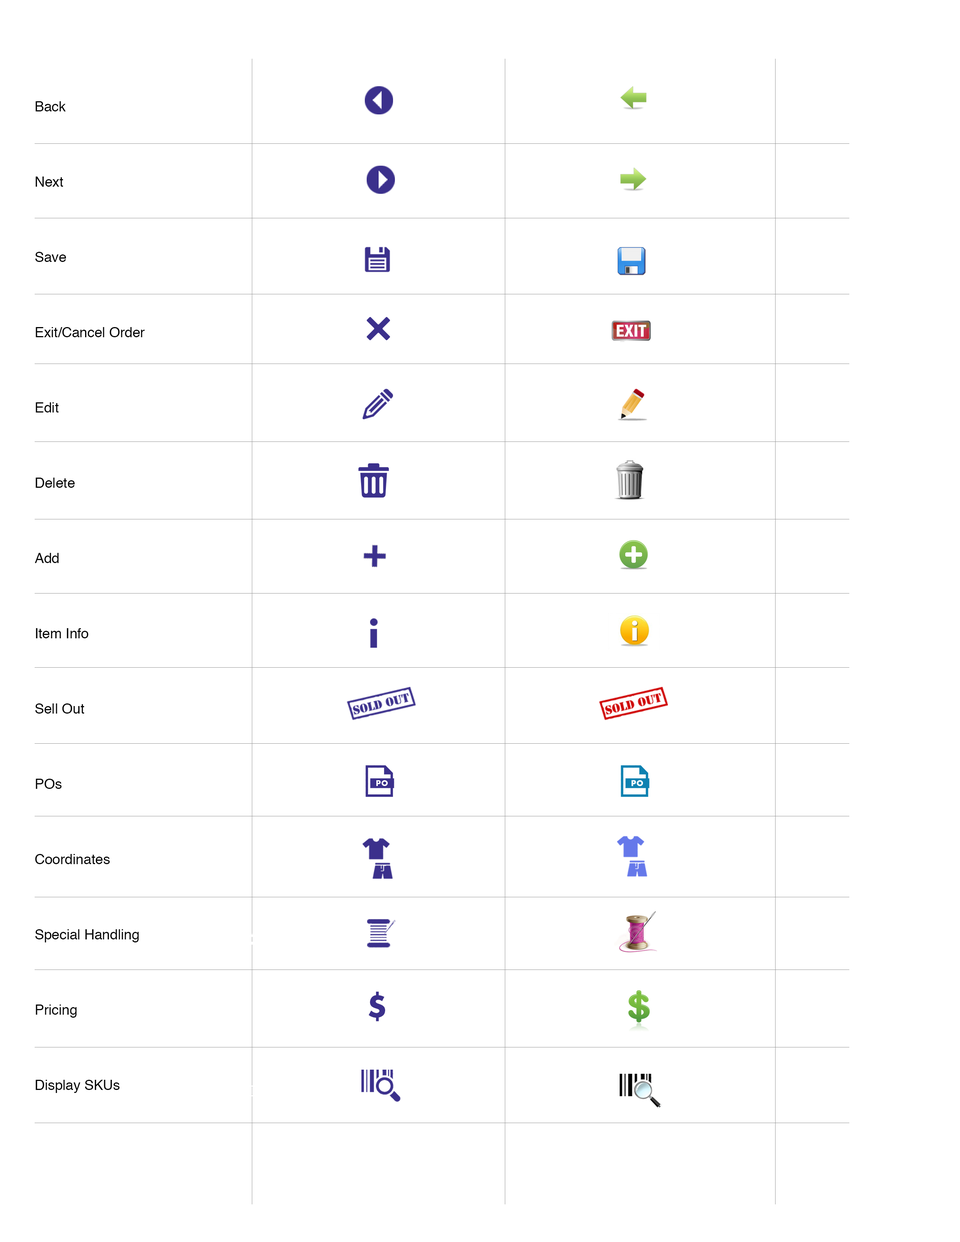
<style>
.page{position:relative;width:960px;height:1242px;background:#ffffff}
.page>*{position:absolute;margin:0}
.t1{font:14.1px/75.3px "Helvetica";letter-spacing:-0.005em;color:#030303}
.t2{font:29.7px "Futura-Bold";letter-spacing:0.05em;color:#3b308c}
</style>
<div class="page">
<p class="t1" style="left:35px;top:101px;width:110px;height:992px">Back<br>Next <br>Save<br>Exit/Cancel Order<br>Edit<br>Delete<br>Add<br>Item Info<br>Sell Out<br>POs<br>Coordinates<br>Special Handling<br>Pricing<br>Display SKUs</p>
<p class="t2" style="left:369px;top:992px;width:16px;height:30px">$</p>
</div>
